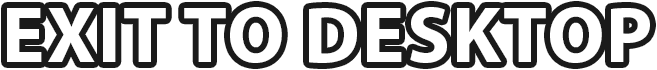
<style>
.page{position:relative;width:657px;height:70px;background:#ffffff}
.page>*{position:absolute;margin:0}
.t1{font:79.9px "MyriadPro-Bold";letter-spacing:0.025em;color:#ffffff}
</style>
<div class="page">
<p class="t1" style="left:7px;top:7px;width:643px;height:56px">EXIT TO DESKTOP</p>
</div>
